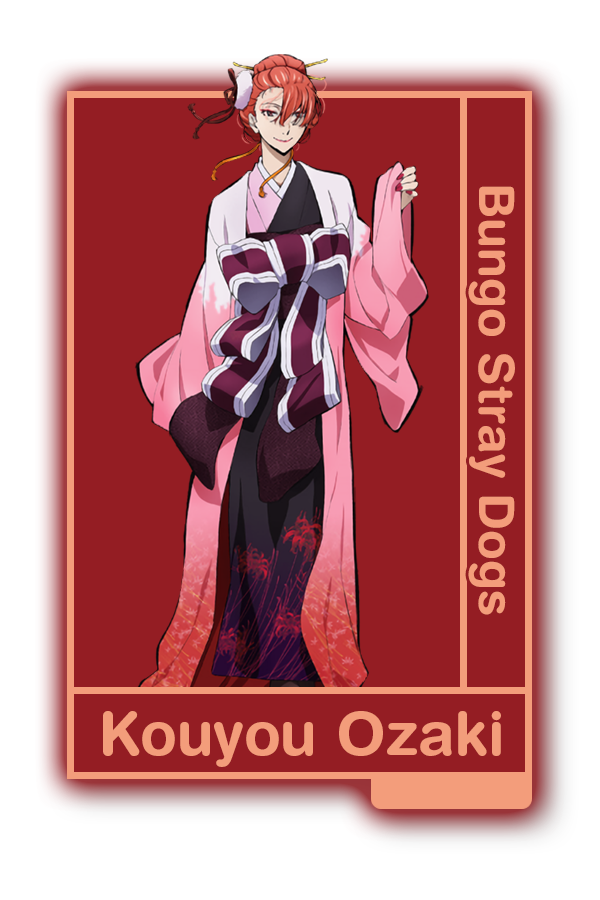
<style>
.page{position:relative;width:600px;height:900px;background:#941d23}
.page>*{position:absolute;margin:0}
.t1{font:48.8px "HelveticaRounded-Bold";color:#f39d7b}
.t2{font:60.3px "HelveticaRounded-Bold";color:#f39d7b}
</style>
<div class="page">
<p class="t1" style="left:468px;top:186px;width:47px;height:429px;rotate:90deg">Bungo Stray Dogs</p>
<p class="t2" style="left:103px;top:711px;width:398px;height:56px">Kouyou Ozaki</p>
</div>
